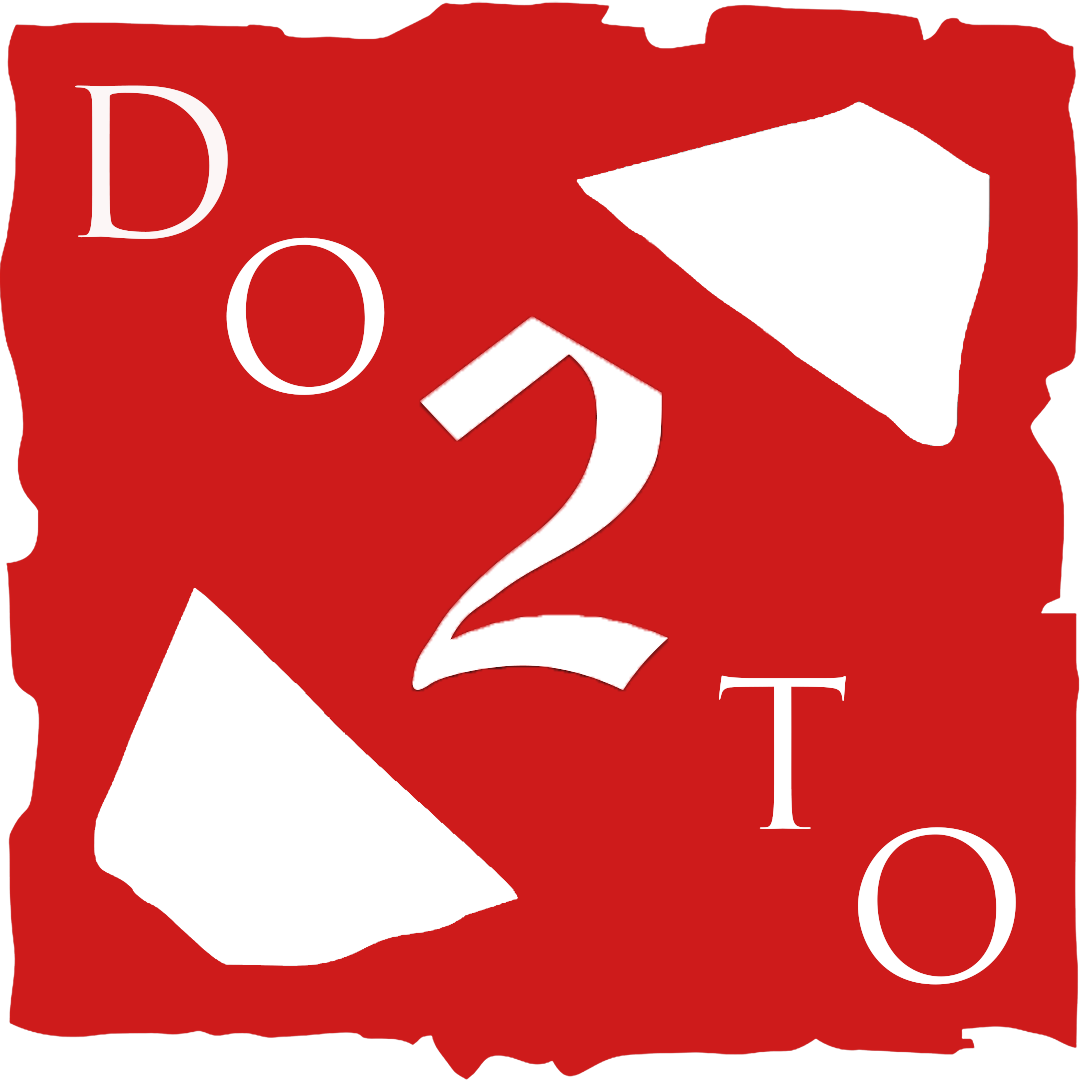
<style>
.page{position:relative;width:1080px;height:1080px;background:#ce1b1b}
.page>*{position:absolute;margin:0}
.t1{font:200px "TrajanColor-Concept";color:#ffffff}
</style>
<div class="page">
<p class="t1" style="left:75px;top:85px;width:153px;height:154px;opacity:0.94">D</p>
<p class="t1" style="left:226px;top:237px;width:159px;height:158px">O</p>
<p class="t1" style="left:719px;top:675px;width:127px;height:154px">T</p>
<p class="t1" style="left:858px;top:827px;width:158px;height:158px">O</p>
</div>
